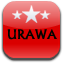
<style>
.page{position:relative;width:63px;height:63px}
.page>*{position:absolute;margin:0}
.t1{font:14px "Narkisim";color:#000300}
</style>
<div class="page">
<p class="t1" style="left:7px;top:29px;width:50px;height:11px">URAWA</p>
</div>
